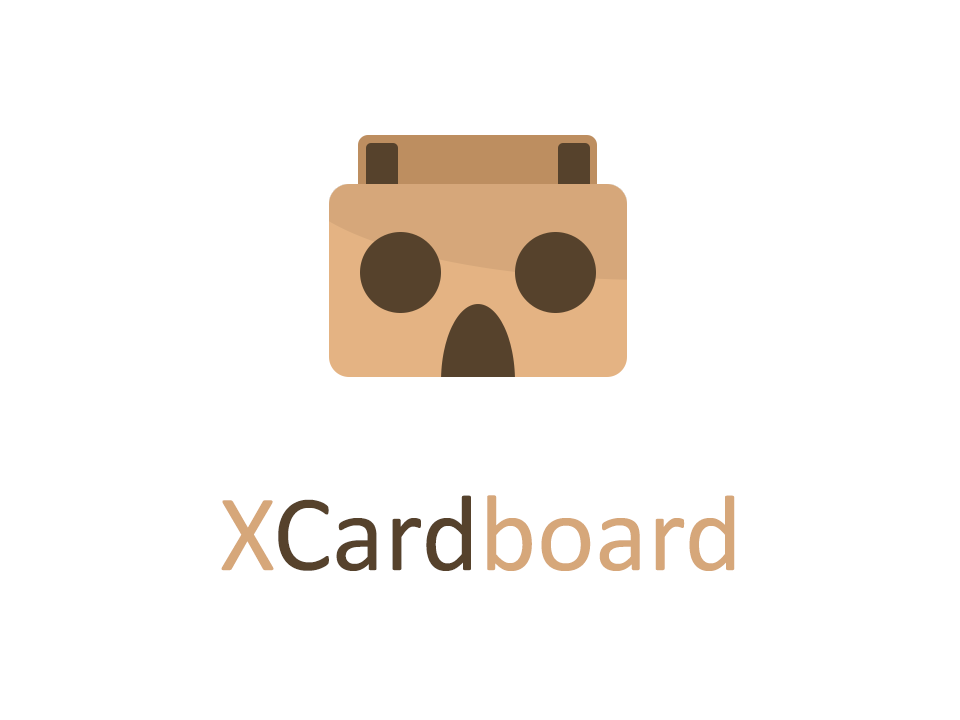
<style>
.page{position:relative;width:960px;height:720px;background:#ffffff}
.page>*{position:absolute;margin:0}
.t1{font:110px "Calibri";color:#d6a77a}
.t2{font:110px "Calibri";color:#56422c}
</style>
<div class="page">
<p class="t1" style="left:221px;top:495px;width:514px;height:76px">X<span class="t2">Card</span>board</p>
</div>
